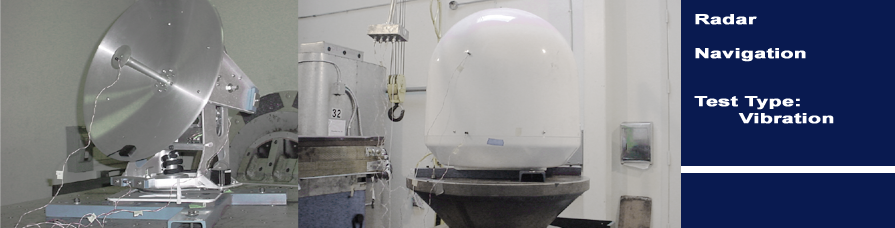
<style>
.page{position:relative;width:895px;height:228px;background:#091a50}
.page>*{position:absolute;margin:0}
.t1{font:14px "Arial-BoldMT";color:#ffffff;font-weight:bold;scale:1.5 1}
</style>
<div class="page">
<p class="t1" style="left:695px;top:14px;width:111px;height:48px">Radar<br><br>Navigation</p>
<p class="t1" style="left:694px;top:96px;width:140px;height:28px">Test Type:<br>       Vibration</p>
</div>
